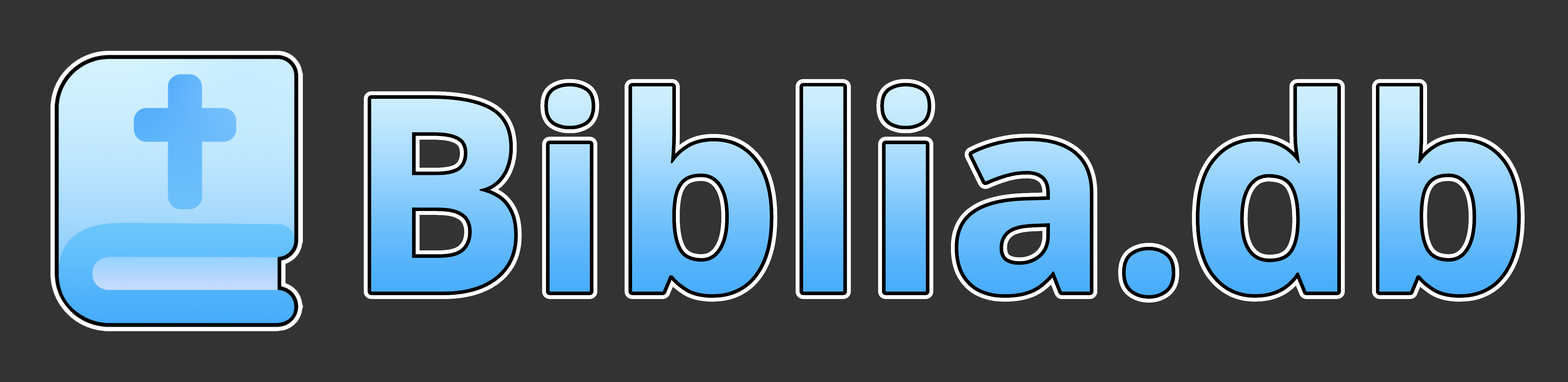
<style>
.page{position:relative;width:1568px;height:382px;background:#333333}
.page>*{position:absolute;margin:0}
.t1{font:270.3px "OpenSans-Bold"}
</style>
<div class="page">
<p class="t1" style="left:371px;top:86px;width:1146px;height:209px">Biblia.db</p>
</div>
